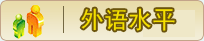
<style>
.page{position:relative;width:204px;height:41px}
.page>*{position:absolute;margin:0}
.t1{font:24px "SimHei";color:#f5e000}
</style>
<div class="page">
<p class="t1" style="left:81px;top:8px;width:94px;height:23px">外语水平</p>
</div>
